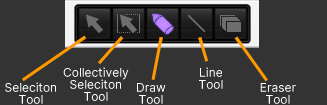
<style>
.page{position:relative;width:327px;height:105px;background:#333333}
.page>*{position:absolute;margin:0}
.t1{font:12px/12px "Sarasa-Gothic-SC-Regular";color:#ffffff}
</style>
<div class="page">
<p class="t1" style="left:63px;top:67px;width:66px;height:34px;text-align:center">Collectively<br>Seleciton<br>Tool</p>
<p class="t1" style="left:199px;top:67px;width:24px;height:22px;text-align:center">Line<br>Tool</p>
<p class="t1" style="left:5px;top:82px;width:51px;height:22px;text-align:center">Seleciton<br>Tool</p>
<p class="t1" style="left:137px;top:83px;width:29px;height:21px;text-align:center">Draw<br>Tool</p>
<p class="t1" style="left:260px;top:83px;width:36px;height:21px;text-align:center">Eraser<br>Tool</p>
</div>
